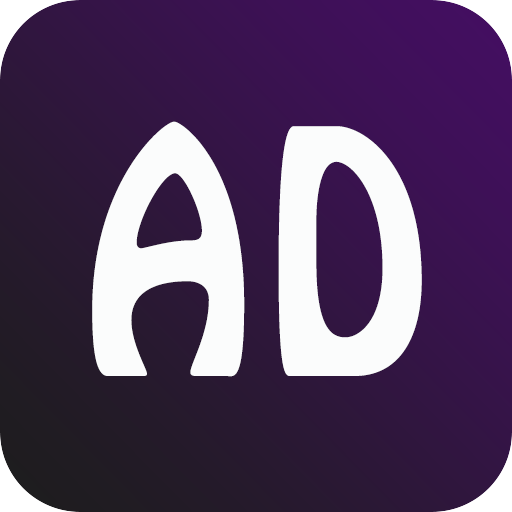
<style>
.page{position:relative;width:512px;height:512px}
.page>*{position:absolute;margin:0}
.t1{font:300px "HoboStd";color:#fbfcfc;scale:0.8 1}
</style>
<div class="page">
<p class="t1" style="left:92px;top:121px;width:330px;height:256px">A D</p>
</div>
